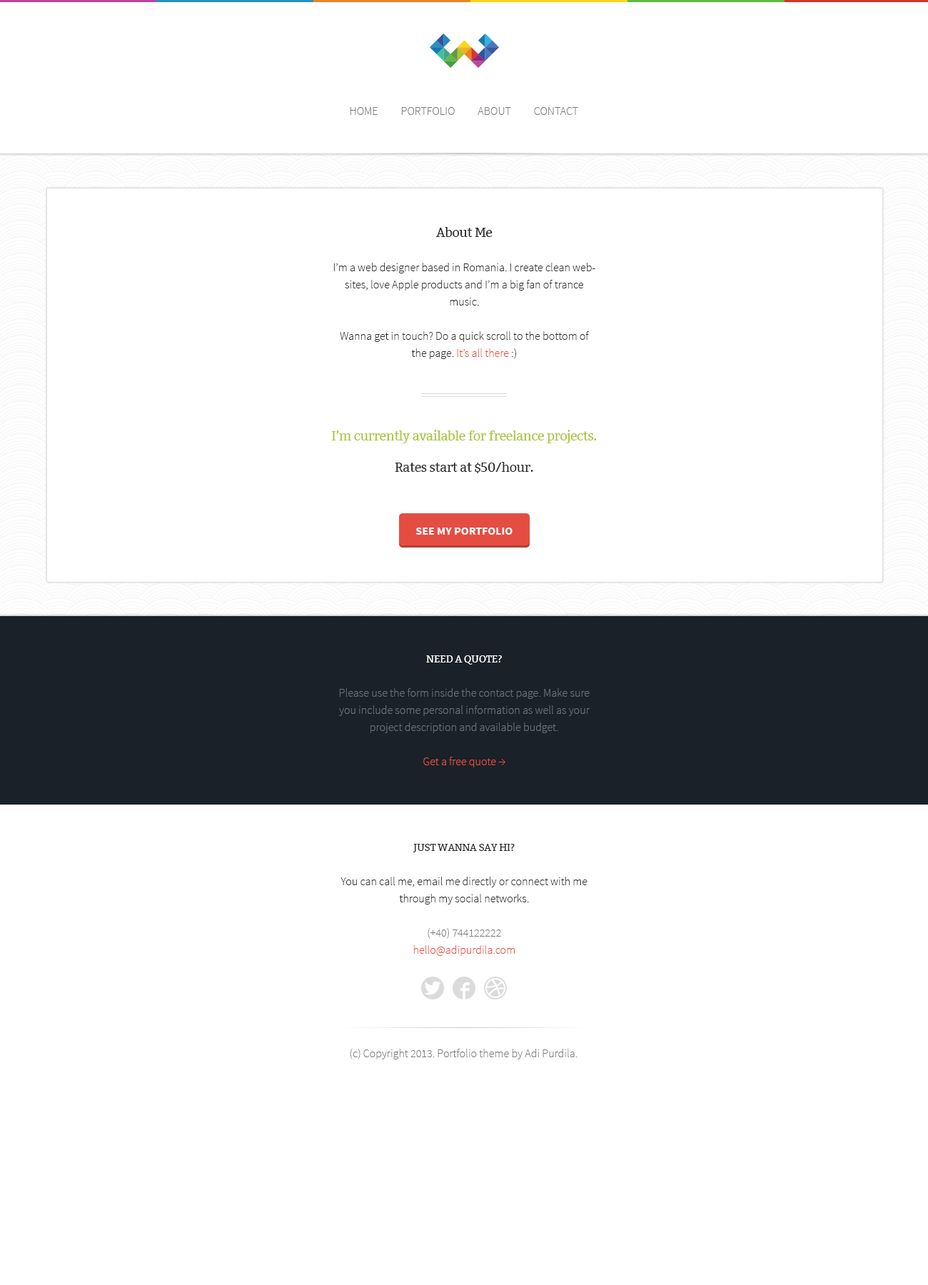
<style>
.page{position:relative;width:928px;height:1285px;background:#ffffff}
.page>*{position:absolute;margin:0}
.t1{font:11.4px "SourceSansPro-Light";color:#7a7a7a;text-transform:uppercase}
.t2{font:11.4px/17.1px "SourceSansPro-Light";color:#2b2b2b}
.t3{font:12.8px "Bitter-Regular";letter-spacing:-0.025em;color:#2b2b2b}
.t4{font:11.4px/17.1px "SourceSansPro-Light";color:#e54d42}
.t5{font:12.8px "Bitter-Regular";letter-spacing:-0.025em;color:#a6c63a}
.t6{font:11.4px "SourceSansPro-Bold";color:#ffffff;text-transform:uppercase}
.t7{font:11.4px/17.1px "SourceSansPro-Light";color:#687078}
.t8{font:10px/17.1px "Bitter-Regular";letter-spacing:-0.025em;color:#ffffff;text-transform:uppercase}
.t9{font:10px/17.1px "Bitter-Regular";letter-spacing:-0.025em;color:#2b2b2b;text-transform:uppercase}
.t10{font:11.4px/17.1px "SourceSansPro-Light";color:#7a7a7a}
.t11{font:11.4px "SourceSansPro-Light";color:#7a7a7a}
</style>
<div class="page">
<p class="t1" style="left:350px;top:107px;width:228px;height:8px">Home          Portfolio          About          Contact</p>
<p class="t2" style="left:333px;top:227px;width:262px;height:132px;text-align:center"><span class="t3">About Me<br><br></span>I’m a web designer based in Romania. I create clean websites, love Apple products and I’m a big fan of trance music.<br><br>Wanna get in touch? Do a quick scroll to the bottom of the page. <span class="t4">It’s all there</span> :)</p>
<p class="t5" style="left:331px;top:430px;width:266px;height:43px;text-align:center">I’m currently available for freelance projects.<br><span class="t3"><br>Rates start at $50/hour.</span></p>
<p class="t6" style="left:415px;top:528px;width:98px;height:7px">See my portfolio</p>
<p class="t7" style="left:339px;top:655px;width:251px;height:112px;text-align:center"><span class="t8">Need a quote?<br><br></span>Please use the form inside the contact page. Make sure you include some personal information as well as your project description and available budget.<br><br><span class="t4">Get a free quote →</span></p>
<p class="t2" style="left:341px;top:844px;width:247px;height:112px;text-align:center"><span class="t9">Just wanna say hi?<br><br></span>You can call me, email me directly or connect with me through my social networks.<br><br><span class="t10">(+40) 744122222<br></span><span class="t4">hello@adipurdila.com</span></p>
<p class="t11" style="left:350px;top:1049px;width:228px;height:10px">(c) Copyright 2013. Portfolio theme by Adi Purdila.</p>
</div>
